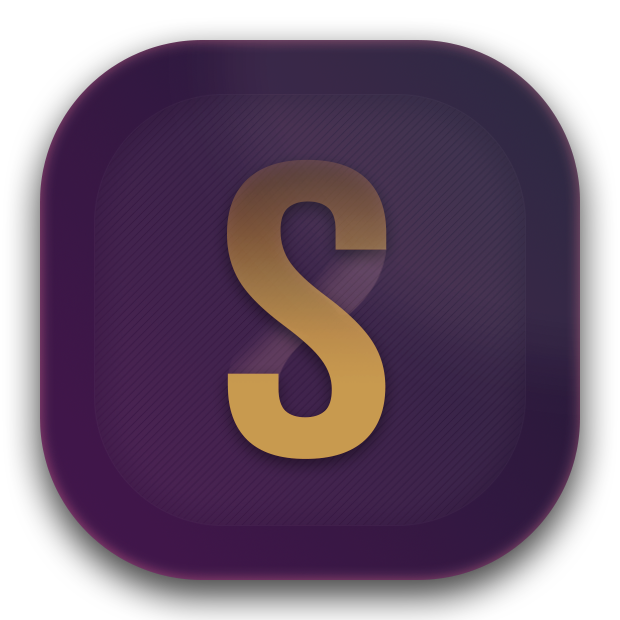
<style>
.page{position:relative;width:620px;height:620px}
.page>*{position:absolute;margin:0}
.t1{font:368px "HighstoriesSans"}
</style>
<div class="page">
<p class="t1" style="left:227px;top:159px;width:160px;height:300px;rotate:180deg">S</p>
</div>
